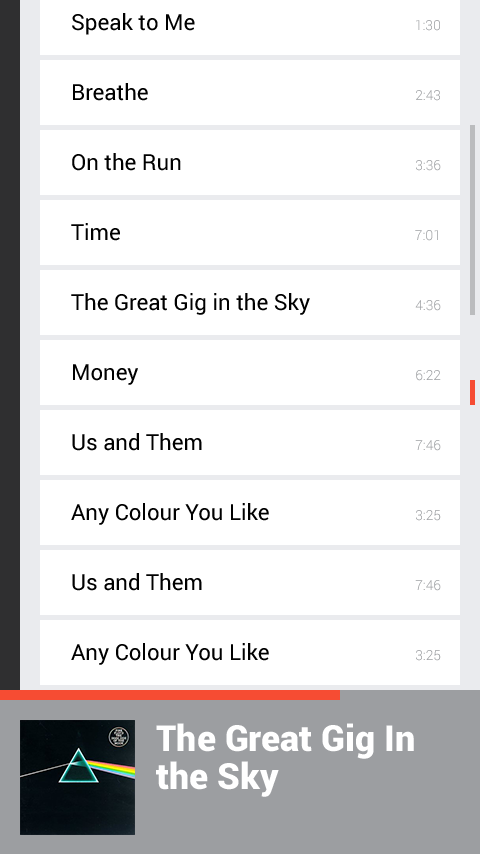
<style>
.page{position:relative;width:480px;height:854px;background:#ffffff}
.page>*{position:absolute;margin:0}
.t1{font:22.2px "Roboto-Regular";color:#000000}
.t2{font:13.8px "Roboto-Light"}
.t3{font:13.8px "Roboto-Light";color:#9c9ea1}
.t4{font:36px/38px "Roboto-Black";color:#ffffff}
</style>
<div class="page">
<p class="t1" style="left:72px;top:13px;width:123px;height:22px">Speak to Me</p>
<p class="t2" style="left:416px;top:20px;width:24px;height:11px">1:30</p>
<p class="t1" style="left:73px;top:83px;width:75px;height:18px">Breathe</p>
<p class="t2" style="left:416px;top:90px;width:24px;height:11px">2:43</p>
<p class="t1" style="left:72px;top:153px;width:109px;height:18px">On the Run</p>
<p class="t2" style="left:416px;top:160px;width:25px;height:11px">3:36</p>
<p class="t1" style="left:71px;top:223px;width:49px;height:18px">Time</p>
<p class="t2" style="left:415px;top:230px;width:23px;height:11px">7:01</p>
<p class="t1" style="left:71px;top:293px;width:239px;height:22px">The Great Gig in the Sky</p>
<p class="t3" style="left:415px;top:300px;width:26px;height:11px">4:36</p>
<p class="t1" style="left:73px;top:364px;width:65px;height:21px">Money</p>
<p class="t3" style="left:416px;top:370px;width:25px;height:11px">6:22</p>
<p class="t1" style="left:72px;top:433px;width:130px;height:18px">Us and Them</p>
<p class="t2" style="left:415px;top:440px;width:26px;height:11px">7:46</p>
<p class="t1" style="left:71px;top:503px;width:198px;height:22px">Any Colour You Like</p>
<p class="t3" style="left:416px;top:510px;width:25px;height:11px">3:25</p>
<p class="t1" style="left:72px;top:573px;width:130px;height:18px">Us and Them</p>
<p class="t2" style="left:415px;top:580px;width:26px;height:11px">7:46</p>
<p class="t1" style="left:71px;top:643px;width:198px;height:22px">Any Colour You Like</p>
<p class="t3" style="left:416px;top:650px;width:25px;height:11px">3:25</p>
<p class="t4" style="left:156px;top:723px;width:258px;height:74px">The Great Gig In <br>the Sky</p>
</div>
